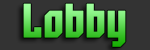
<style>
.page{position:relative;width:150px;height:50px;background:#333333}
.page>*{position:absolute;margin:0}
.t1{font:47.9px "Whitestone-Bold"}
</style>
<div class="page">
<p class="t1" style="left:23px;top:3px;width:103px;height:44px">Lobby</p>
</div>
